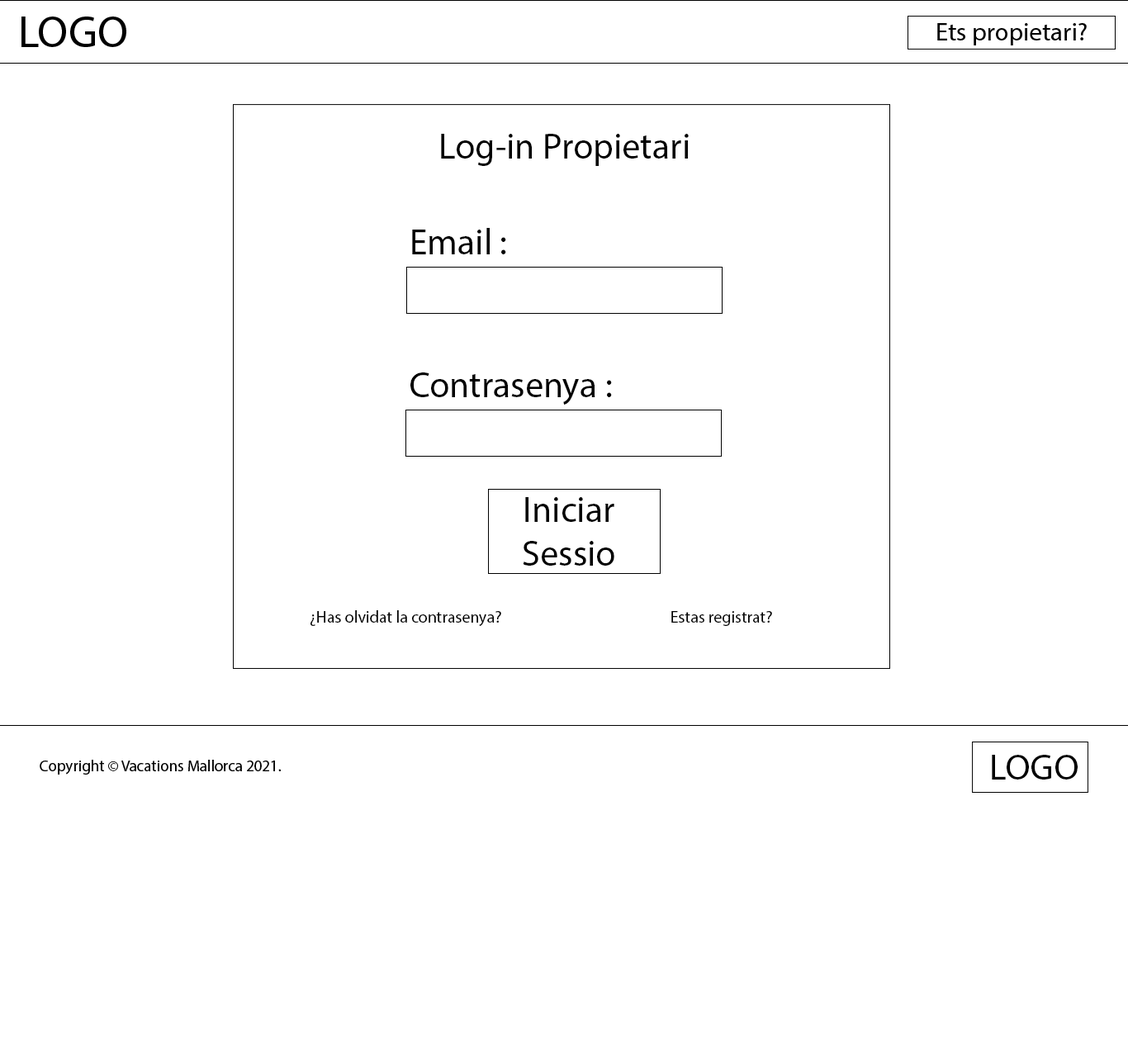
<style>
.page{position:relative;width:1128px;height:1057px;background:#ffffff}
.page>*{position:absolute;margin:0}
.t1{font:36.3px "MyriadPro-Regular";color:#000000}
.t2{font:16.5px "MyriadPro-Regular";color:#000000}
</style>
<div class="page">
<p class="t1" style="left:441px;top:134px;width:248px;height:32px">Log-in Propietari</p>
<p class="t1" style="left:412px;top:228px;width:94px;height:26px">Email :</p>
<p class="t1" style="left:410px;top:372px;width:202px;height:33px">Contrasenya :</p>
<p class="t1" style="left:523px;top:497px;width:91px;height:69px">Iniciar<br>Sessio</p>
<p class="t2" style="left:311px;top:610px;width:190px;height:16px">¿Has olvidat la contrasenya?</p>
<p class="t2" style="left:671px;top:611px;width:101px;height:15px">Estas registrat?</p>
</div>
